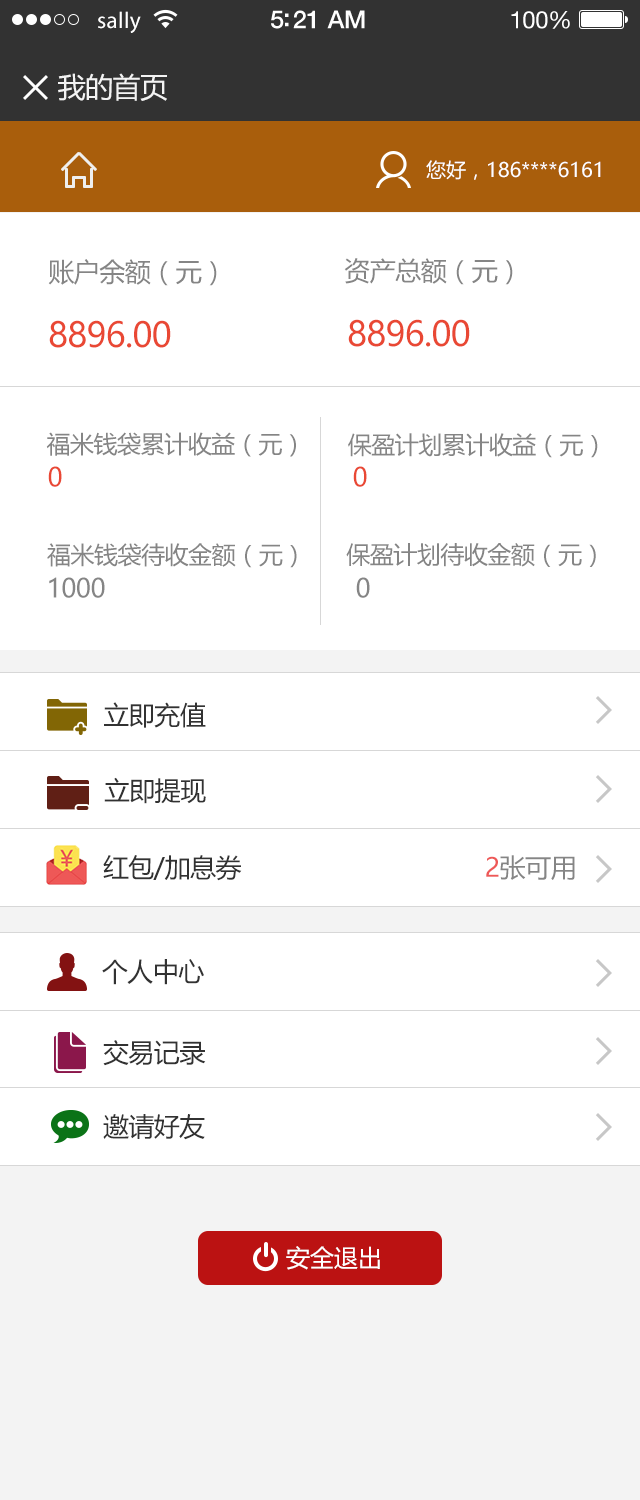
<style>
.page{position:relative;width:640px;height:1500px;background:#ffffff}
.page>*{position:absolute;margin:0}
.t1{font:23px "MyriadPro-Regular";letter-spacing:0.02em;color:#ffffff}
.t2{font:25px "HelveticaNeue-Medium";letter-spacing:-0.02em;color:#ffffff}
.t3{font:24px "HelveticaNeue";letter-spacing:-0.02em;color:#ffffff}
.t4{font:28px "MicrosoftYaHei";letter-spacing:-0.02em;color:#f3f3f3}
.t5{font:20px "MicrosoftYaHei";color:#fefefe}
.t6{font:26px "MicrosoftYaHei";letter-spacing:-0.02em;color:#858585}
.t7{font:34px "MicrosoftYaHei";letter-spacing:-0.02em;color:#e94834}
.t8{font:24px "MicrosoftYaHei";letter-spacing:-0.02em;color:#858585}
.t9{font:26px "MicrosoftYaHei";letter-spacing:-0.02em;color:#e94834}
.t10{font:26px "MicrosoftYaHei";letter-spacing:-0.02em;color:#323232}
.t11{font:26px "MicrosoftYaHei";letter-spacing:-0.02em;color:#ee5857}
.t12{font:24px "MicrosoftYaHei";color:#ffffff}
</style>
<div class="page">
<p class="t1" style="left:98px;top:11px;width:43px;height:23px">sally</p>
<p class="t2" style="left:271px;top:10px;width:94px;height:19px">5:21 AM</p>
<p class="t3" style="left:511px;top:11px;width:59px;height:18px">100%</p>
<p class="t4" style="left:58px;top:73px;width:109px;height:28px">我的首页</p>
<p class="t5" style="left:426px;top:160px;width:175px;height:20px">您好，186****6161</p>
<p class="t6" style="left:48px;top:259px;width:169px;height:27px">账户余额（元）</p>
<p class="t6" style="left:344px;top:258px;width:169px;height:27px">资产总额（元）</p>
<p class="t7" style="left:49px;top:320px;width:122px;height:28px">8896.00</p>
<p class="t7" style="left:348px;top:319px;width:122px;height:28px">8896.00</p>
<p class="t8" style="left:46px;top:432px;width:250px;height:25px">福米钱袋累计收益（元）</p>
<p class="t8" style="left:348px;top:433px;width:250px;height:25px">保盈计划累计收益（元）</p>
<p class="t9" style="left:48px;top:466px;width:14px;height:21px">0</p>
<p class="t9" style="left:353px;top:466px;width:14px;height:21px">0</p>
<p class="t8" style="left:47px;top:543px;width:250px;height:25px">福米钱袋待收金额（元）</p>
<p class="t8" style="left:346px;top:543px;width:250px;height:24px">保盈计划待收金额（元）</p>
<p class="t6" style="left:49px;top:577px;width:56px;height:21px">1000</p>
<p class="t6" style="left:356px;top:577px;width:14px;height:21px">0</p>
<p class="t10" style="left:104px;top:702px;width:102px;height:26px">立即充值</p>
<p class="t10" style="left:104px;top:777px;width:102px;height:27px">立即提现</p>
<p class="t10" style="left:103px;top:855px;width:472px;height:26px">红包/加息券                                 <span class="t11"> 2</span><span class="t6">张可用</span></p>
<p class="t10" style="left:102px;top:959px;width:102px;height:26px">个人中心</p>
<p class="t10" style="left:103px;top:1040px;width:103px;height:26px">交易记录</p>
<p class="t10" style="left:103px;top:1114px;width:102px;height:26px">邀请好友</p>
<p class="t12" style="left:286px;top:1246px;width:94px;height:24px">安全退出</p>
</div>
